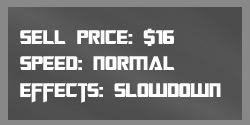
<style>
.page{position:relative;width:250px;height:125px}
.page>*{position:absolute;margin:0}
.t1{font:22px "TransformersMovie";color:#ffffff}
.t2{font:22px "TransformersMovie";letter-spacing:0.02em;color:#ffffff}
</style>
<div class="page">
<p class="t1" style="left:20px;top:28px;width:201px;height:75px">sell p<span class="t2">ri</span>ce: $16<br>spee<span class="t2">d</span>: <span class="t2">normal<br></span>effects: slowdown</p>
</div>
